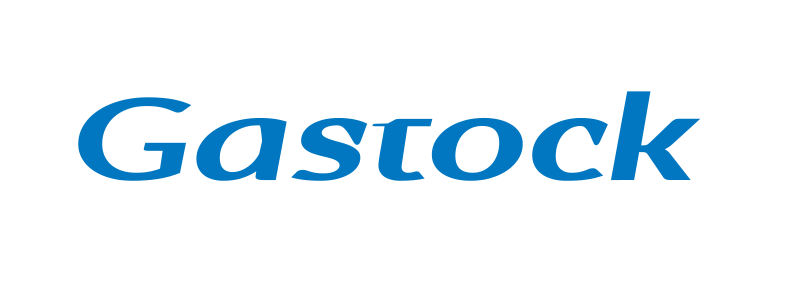
<style>
.page{position:relative;width:791px;height:282px;background:#ffffff}
.page>*{position:absolute;margin:0}
.t1{font:126.1px "Carlito-BoldItalic";color:#0077c0;scale:1.5 1}
</style>
<div class="page">
<p class="t1" style="left:78px;top:91px;width:623px;height:90px">Gastock</p>
</div>
